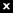
<style>
.page{position:relative;width:13px;height:13px;background:#000000}
.page>*{position:absolute;margin:0}
.t1{font:10.9px "ArialMT";color:#ffffff;font-weight:bold;scale:1.26 1}
</style>
<div class="page">
<p class="t1" style="left:2px;top:3px;width:8px;height:7px">x</p>
</div>
